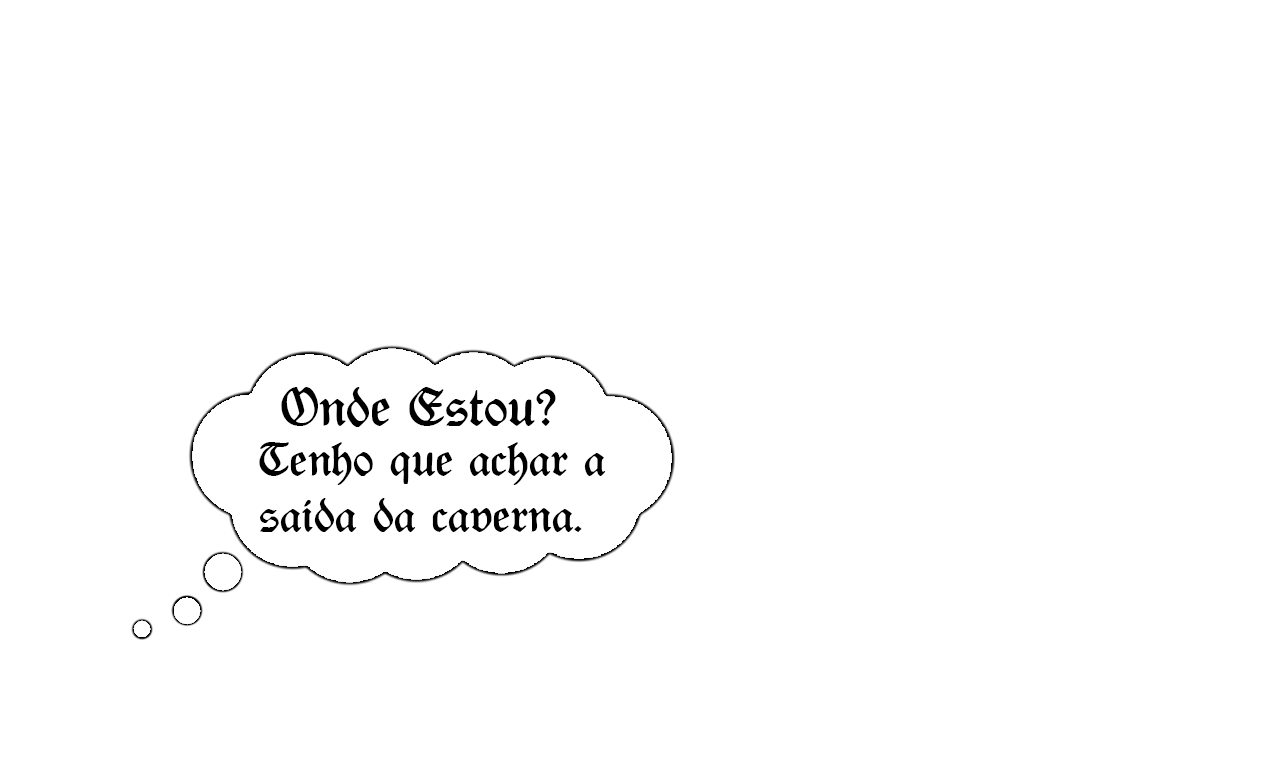
<style>
.page{position:relative;width:1280px;height:768px;background:#ffffff}
.page>*{position:absolute;margin:0}
.t1{font:53.2px "Rediviva";color:#000000}
.t2{font:46.5px "Rediviva";color:#000000}
</style>
<div class="page">
<p class="t1" style="left:281px;top:387px;width:275px;height:40px">Onde Estou?</p>
<p class="t2" style="left:259px;top:442px;width:347px;height:90px">Tenho que achar a <br>saida da caverna.</p>
</div>
